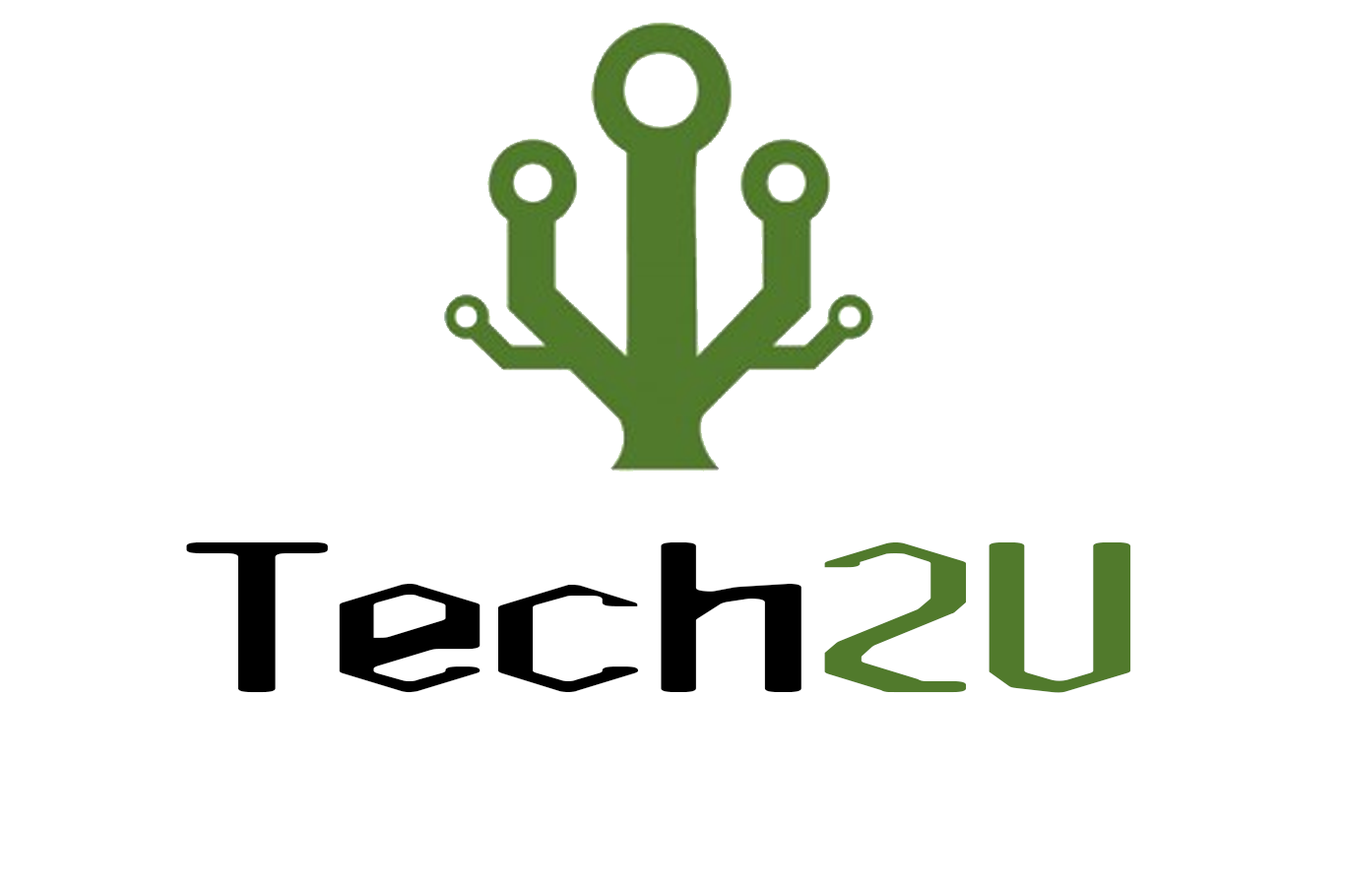
<style>
.page{position:relative;width:1345px;height:886px;background:#ffffff}
.page>*{position:absolute;margin:0}
.t1{font:238.3px "AmosisTechnik";color:#000000}
.t2{font:238.3px "AmosisTechnik";color:#517a2c}
</style>
<div class="page">
<p class="t1" style="left:186px;top:543px;width:946px;height:150px">Tech<span class="t2">2U</span></p>
</div>
